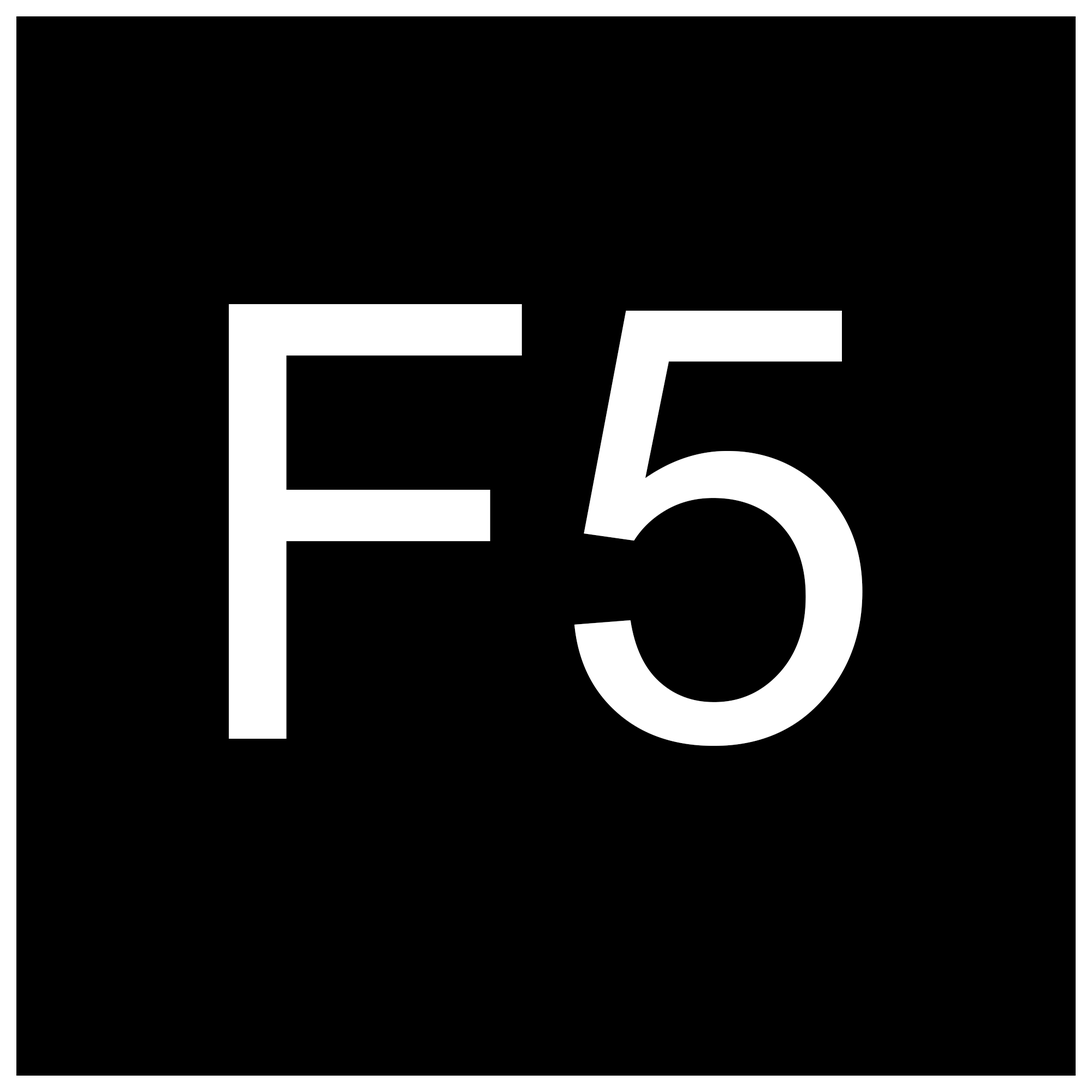
<style>
.page{position:relative;width:1092px;height:1092px;background:#000000}
.page>*{position:absolute;margin:0}
.t1{font:606.7px "ArialMT";color:#ffffff}
</style>
<div class="page">
<p class="t1" style="left:229px;top:304px;width:634px;height:442px">F5</p>
</div>
